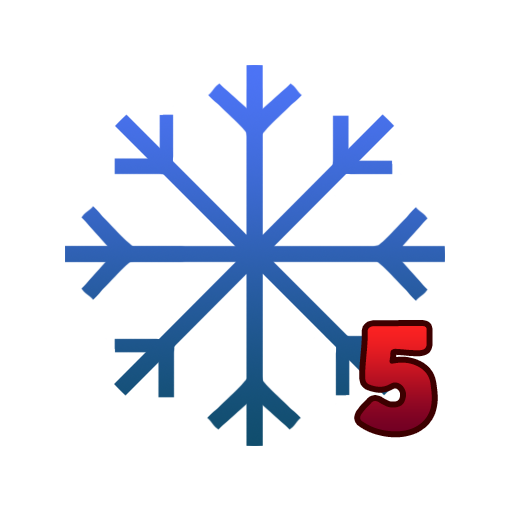
<style>
.page{position:relative;width:512px;height:512px;background:#ffffff}
.page>*{position:absolute;margin:0}
.t1{font:150px "CasualMemories"}
</style>
<div class="page">
<p class="t1" style="left:360px;top:326px;width:72px;height:106px">5</p>
</div>
